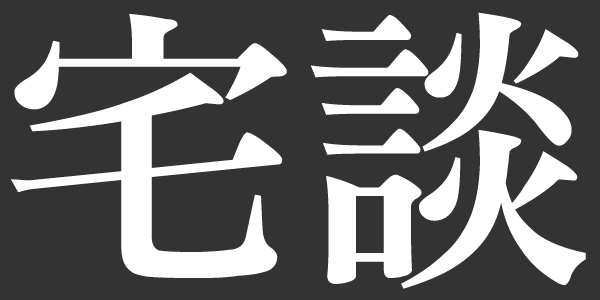
<style>
.page{position:relative;width:600px;height:300px;background:#333333}
.page>*{position:absolute;margin:0}
.t1{font:300px "DFMinchoP-W5-WIN-RKSJ-H";color:#ffffff}
</style>
<div class="page">
<p class="t1" style="left:11px;top:12px;width:575px;height:277px">宅談</p>
</div>
